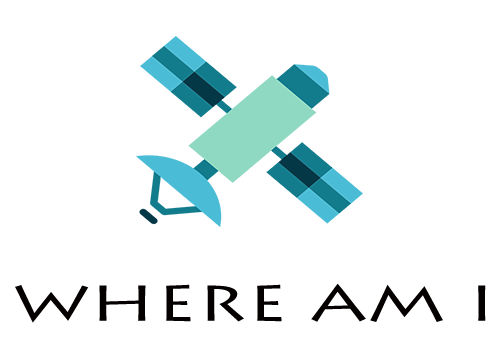
<style>
.page{position:relative;width:500px;height:350px;background:#ffffff}
.page>*{position:absolute;margin:0}
.t1{font:50.4px "LithosPro-Regular";color:#040000;scale:1.43 1}
</style>
<div class="page">
<p class="t1" style="left:15px;top:283px;width:471px;height:40px">WHERE AM I</p>
</div>
